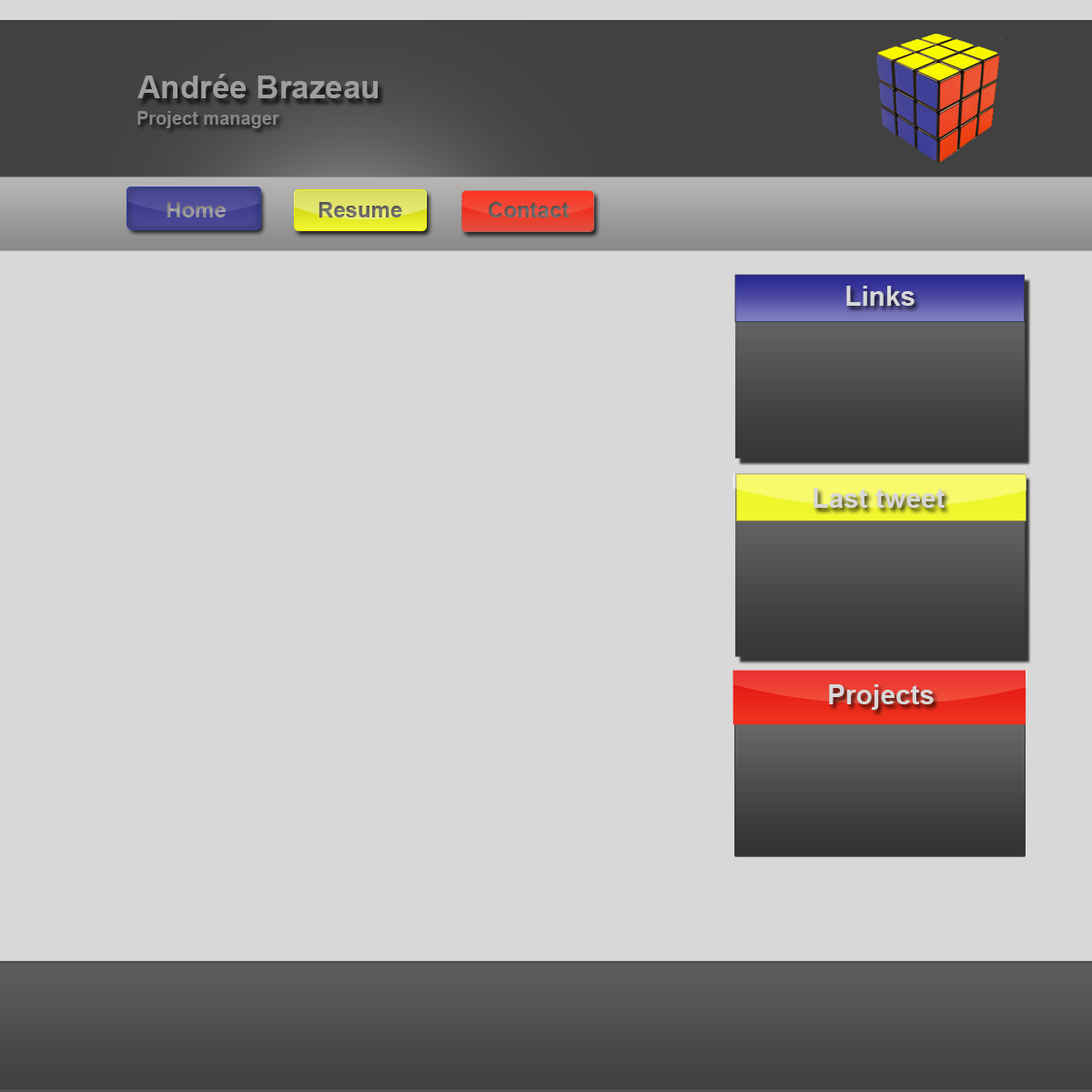
<style>
.page{position:relative;width:1092px;height:1092px;background:#d8d8d8}
.page>*{position:absolute;margin:0}
.t1{font:31.8px "Arial-BoldMT";color:#9f9e9e}
.t2{font:18.2px "Arial-BoldMT";color:#888686}
.t3{font:21.8px "Arial-BoldMT";color:#979595}
.t4{font:21.8px "Arial-BoldMT";color:#6a6867}
.t5{font:21.8px "Arial-BoldMT";color:#666363}
.t6{font:27.3px "Arial-BoldMT";color:#d8d8d8}
</style>
<div class="page">
<p class="t1" style="left:137px;top:74px;width:241px;height:24px">Andrée Brazeau</p>
<p class="t2" style="left:137px;top:111px;width:142px;height:17px">Project manager</p>
<p class="t3" style="left:167px;top:202px;width:59px;height:15px">Home</p>
<p class="t4" style="left:318px;top:202px;width:84px;height:15px">Resume</p>
<p class="t5" style="left:489px;top:202px;width:81px;height:15px">Contact</p>
<p class="t6" style="left:846px;top:286px;width:69px;height:20px">Links</p>
<p class="t6" style="left:814px;top:488px;width:131px;height:20px">Last tweet</p>
<p class="t6" style="left:829px;top:684px;width:105px;height:26px">Projects</p>
</div>
